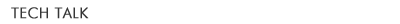
<style>
.page{position:relative;width:400px;height:24px;background:#ffffff}
.page>*{position:absolute;margin:0}
.t1{font:14.7px "FuturaBT-Light";letter-spacing:0.025em;color:#363636;text-transform:uppercase;font-weight:bold}
</style>
<div class="page">
<p class="t1" style="left:11px;top:7px;width:78px;height:12px">tech talk</p>
</div>
